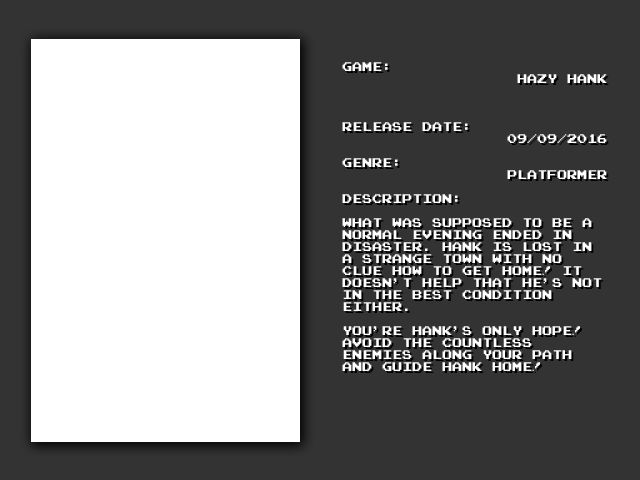
<style>
.page{position:relative;width:640px;height:480px;background:#333333}
.page>*{position:absolute;margin:0}
.t1{font:10px "PressStartReg";color:#ffffff}
</style>
<div class="page">
<p class="t1" style="left:342px;top:62px;width:265px;height:309px">GAME: <br>HAZY HANK<br><br><br><br>RELEASE DATE:<br>09/09/2016<br><br>GENRE:<br>PLATFORMER<br><br>DESCRIPTION:<br><br>WHAT WAS SUPPOSED TO BE A NORMAL EVENING ENDED IN DISASTER. HANK IS LOST IN A STRANGE TOWN WITH NO CLUE HOW TO GET HOME! IT DOESN'T HELP THAT HE'S NOT IN THE BEST CONDITION EITHER.<br><br>YOU'RE HANK'S ONLY HOPE! AVOID THE COUNTLESS ENEMIES ALONG YOUR PATH AND GUIDE HANK HOME!</p>
</div>
